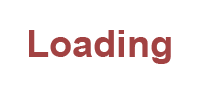
<style>
.page{position:relative;width:200px;height:93px;background:#ffffff}
.page>*{position:absolute;margin:0}
.t1{font:37.5px "Arial-BoldMT";color:#a24242}
</style>
<div class="page">
<p class="t1" style="left:29px;top:30px;width:142px;height:34px">Loading</p>
</div>
